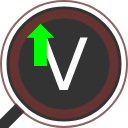
<style>
.page{position:relative;width:128px;height:128px;background:#333333}
.page>*{position:absolute;margin:0}
.t1{font:56px "DejaVuSans";color:#00ff00}
.t2{font:72px "DejaVuSans";color:#ffffff}
</style>
<div class="page">
<p class="t1" style="left:26px;top:23px;width:29px;height:43px">⬆</p>
<p class="t2" style="left:39px;top:37px;width:49px;height:53px">V</p>
</div>
